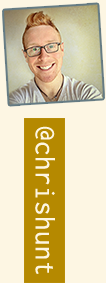
<style>
.page{position:relative;width:106px;height:283px;background:#fdf6e3}
.page>*{position:absolute;margin:0}
.t1{font:25px "Inconsolata-g";color:#fdf6e3}
</style>
<div class="page">
<p class="t1" style="left:35px;top:126px;width:20px;height:148px;rotate:90deg">@chrishunt</p>
</div>
